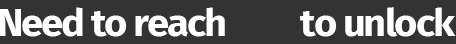
<style>
.page{position:relative;width:456px;height:44px;background:#333333}
.page>*{position:absolute;margin:0}
.t1{font:38px "FiraSans-Bold";letter-spacing:-0.05em;color:#ffffff;scale:1.05 1}
</style>
<div class="page">
<p class="t1" style="left:0px;top:7px;width:456px;height:30px">Need to reach          to unlock</p>
</div>
